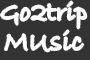
<style>
.page{position:relative;width:90px;height:60px;background:#333333}
.page>*{position:absolute;margin:0}
.t1{font:26px "BradleyHandITC";color:#ffffff;font-weight:bold}
.t2{font:28px "BradleyHandITC";color:#ffffff;font-weight:bold}
</style>
<div class="page">
<p class="t1" style="left:1px;top:1px;width:86px;height:28px">Go2trip</p>
<p class="t2" style="left:5px;top:30px;width:79px;height:22px">MUsic</p>
</div>
